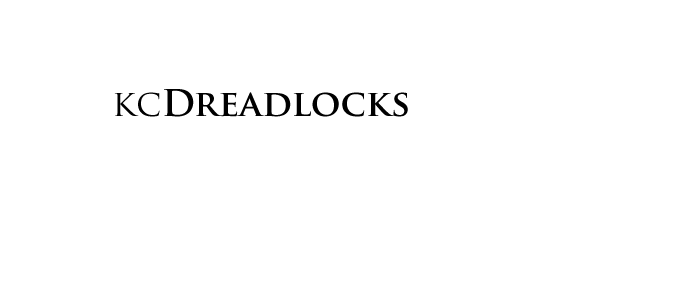
<style>
.page{position:relative;width:700px;height:300px;background:#ffffff}
.page>*{position:absolute;margin:0}
.t1{font:36px "TrajanPro-Bold";color:#000000}
.t2{font:36px "TrajanPro-Regular";color:#000000}
</style>
<div class="page">
<p class="t1" style="left:114px;top:89px;width:294px;height:28px"><span class="t2">kc</span>Dreadlocks</p>
</div>
